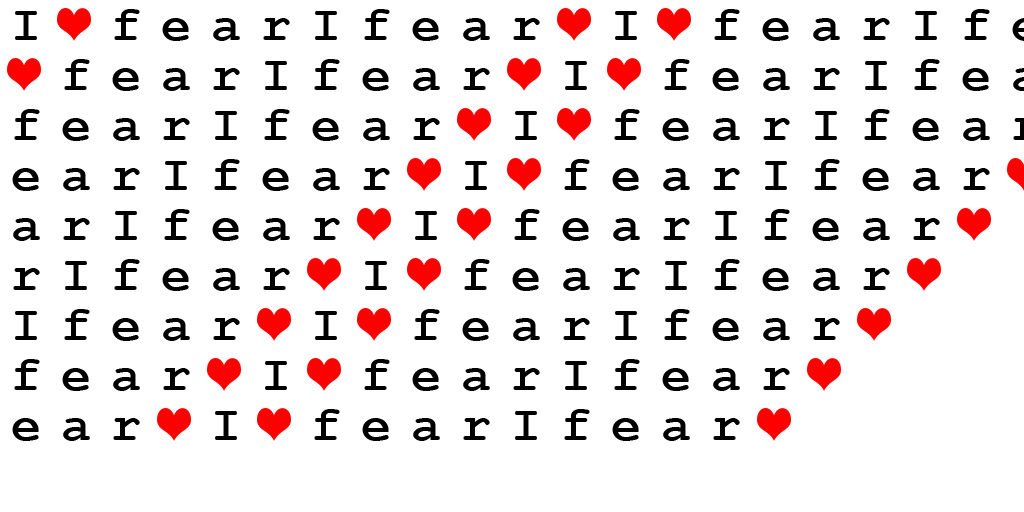
<style>
.page{position:relative;width:1024px;height:512px;background:#ffffff}
.page>*{position:absolute;margin:0}
.t1{font:50px "CourierNewPS-BoldMT";letter-spacing:0.4em;color:#000000}
</style>
<div class="page">
<p class="t1" style="left:15px;top:9px;width:525px;height:32px">I fearIfear</p>
<p class="t1" style="left:465px;top:159px;width:525px;height:32px">I fearIfear</p>
<p class="t1" style="left:415px;top:209px;width:525px;height:32px">I fearIfear</p>
<p class="t1" style="left:365px;top:259px;width:525px;height:32px">I fearIfear</p>
<p class="t1" style="left:315px;top:309px;width:525px;height:32px">I fearIfear</p>
<p class="t1" style="left:265px;top:359px;width:525px;height:32px">I fearIfear</p>
<p class="t1" style="left:215px;top:409px;width:525px;height:32px">I fearIfear</p>
</div>
